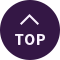
<style>
.page{position:relative;width:60px;height:60px;background:#341745}
.page>*{position:absolute;margin:0}
.t1{font:14px "NotoSansKR-Bold";letter-spacing:0.025em;color:#faf2ff}
</style>
<div class="page">
<p class="t1" style="left:15px;top:34px;width:30px;height:11px">TOP</p>
</div>
